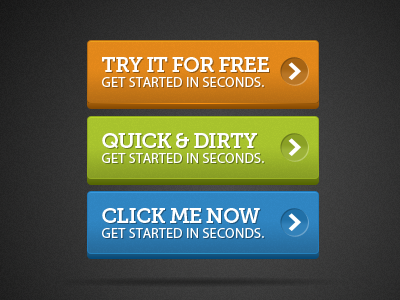
<style>
.page{position:relative;width:400px;height:300px}
.page>*{position:absolute;margin:0}
.t1{font:14px/15.1px "MyriadPro-Regular";letter-spacing:0.02em;color:#ffffff;text-transform:uppercase}
.t2{font:21px/17.1px "MuseoSlab-700";letter-spacing:-0.04em;color:#ffffff;text-transform:uppercase}
.t3{font:21px/15.1px "MuseoSlab-700";letter-spacing:-0.04em;color:#ffffff;text-transform:uppercase}
</style>
<div class="page">
<p class="t1" style="left:102px;top:57px;width:167px;height:30px"><span class="t2">Try it for Free<br></span>Get Started in Seconds.</p>
<p class="t1" style="left:102px;top:133px;width:162px;height:30px"><span class="t2">quick &amp; dirty<br></span>Get Started in Seconds.</p>
<p class="t1" style="left:102px;top:208px;width:162px;height:30px"><span class="t3">click me now<br></span>Get Started in Seconds.</p>
</div>
